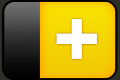
<style>
.page{position:relative;width:120px;height:80px}
.page>*{position:absolute;margin:0}
.t1{font:78.5px "Arial-BoldMT";color:#ffffff}
</style>
<div class="page">
<p class="t1" style="left:56px;top:19px;width:41px;height:40px">+</p>
</div>
